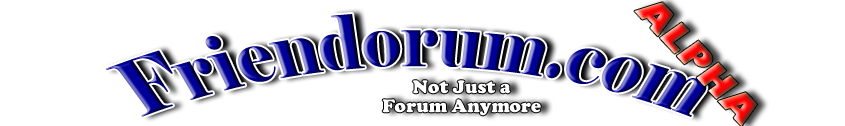
<style>
.page{position:relative;width:845px;height:126px;background:#ffffff}
.page>*{position:absolute;margin:0}
.t1{font:36px "GillSans-UltraBold";letter-spacing:0.005em}
.t2{font:64px "Elephant-Regular";letter-spacing:0.005em}
.t3{font:18.7px/18.7px "CooperBlack";letter-spacing:0.005em;color:#ffffff}
</style>
<div class="page">
<p class="t1" style="left:634px;top:2px;width:124px;height:125px;rotate:47deg">ALPHA</p>
<p class="t2" style="left:105px;top:14px;width:602px;height:103px">Friendorum.com</p>
<p class="t3" style="left:382px;top:80px;width:159px;height:36px;text-align:center">Not Just a<br>Forum Anymore</p>
</div>
